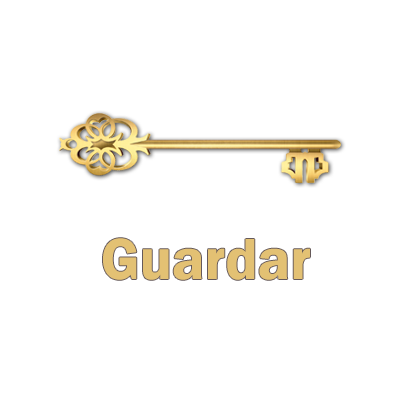
<style>
.page{position:relative;width:400px;height:400px;background:#ffffff}
.page>*{position:absolute;margin:0}
.t1{font:60px "FranklinGothic-Demi";color:#e3c173}
</style>
<div class="page">
<p class="t1" style="left:103px;top:238px;width:207px;height:42px">Guardar</p>
</div>
